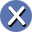
<style>
.page{position:relative;width:32px;height:32px;background:#5a75ad}
.page>*{position:absolute;margin:0}
.t1{font:40px "OCRAExtended";color:#ffffff}
</style>
<div class="page">
<p class="t1" style="left:8px;top:6px;width:17px;height:19px">x</p>
</div>
